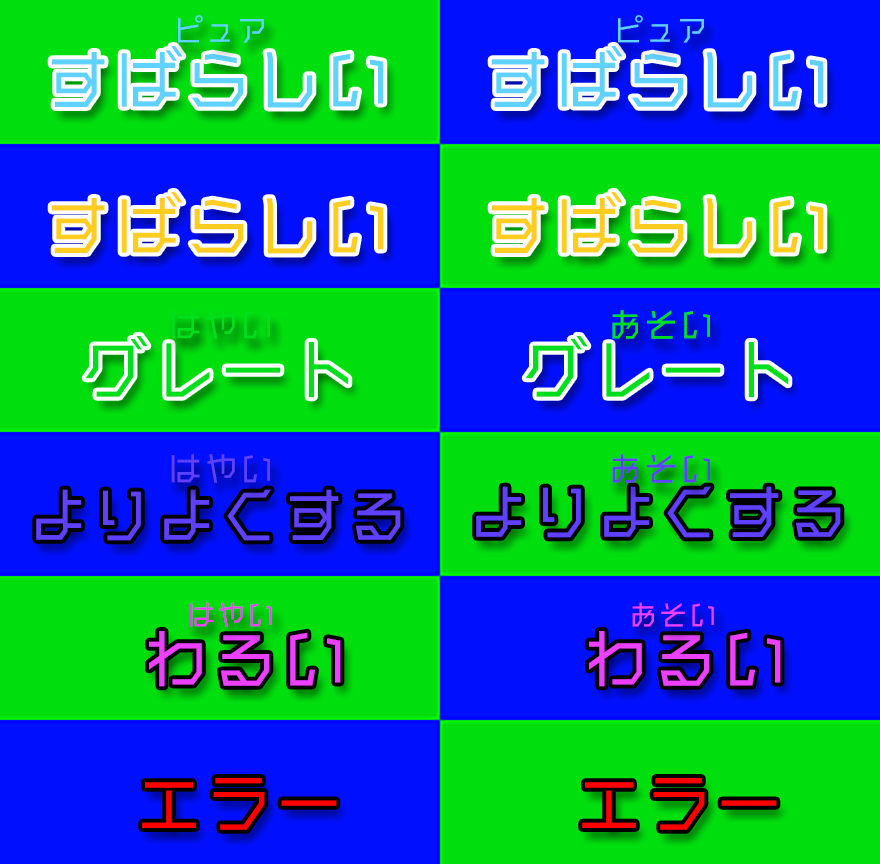
<style>
.page{position:relative;width:880px;height:864px;background:#00df0e}
.page>*{position:absolute;margin:0}
.t1{font:32px "Makinas-4-Square";color:#60d2ff}
.t2{font:70px "Makinas-4-Square";color:#60d2ff}
.t3{font:70px "Makinas-4-Square";color:#ffcc20}
.t4{font:36px "Makinas-4-Square";color:#00df1d}
.t5{font:70px "Makinas-4-Square";color:#00df1d}
.t6{font:36px "Makinas-4-Square";color:#5f40ff}
.t7{font:64px "Makinas-4-Square";color:#5f40ff}
.t8{font:30px "Makinas-4-Square";color:#ec40ff}
.t9{font:70px "Makinas-4-Square";color:#ec40ff}
.t10{font:70px "Makinas-4-Square";color:#ff0000}
</style>
<div class="page">
<p class="t1" style="left:178px;top:15px;width:86px;height:28px">ピュア</p>
<p class="t1" style="left:618px;top:15px;width:86px;height:28px">ピュア</p>
<p class="t2" style="left:51px;top:46px;width:333px;height:62px">すばらしい</p>
<p class="t2" style="left:491px;top:46px;width:333px;height:62px">すばらしい</p>
<p class="t3" style="left:51px;top:192px;width:333px;height:62px">すばらしい</p>
<p class="t3" style="left:491px;top:192px;width:333px;height:62px">すばらしい</p>
<p class="t4" style="left:171px;top:310px;width:99px;height:29px">はやい</p>
<p class="t4" style="left:612px;top:310px;width:98px;height:29px">おそい</p>
<p class="t5" style="left:525px;top:335px;width:264px;height:63px">グレート</p>
<p class="t6" style="left:171px;top:454px;width:99px;height:29px">はやい</p>
<p class="t6" style="left:612px;top:454px;width:98px;height:29px">おそい</p>
<p class="t7" style="left:476px;top:486px;width:365px;height:52px">よりよくする</p>
<p class="t7" style="left:36px;top:489px;width:365px;height:52px">よりよくする</p>
<p class="t8" style="left:190px;top:602px;width:82px;height:25px">はやい</p>
<p class="t8" style="left:632px;top:602px;width:82px;height:25px">おそい</p>
<p class="t9" style="left:148px;top:631px;width:193px;height:56px">わるい</p>
<p class="t9" style="left:588px;top:631px;width:193px;height:56px">わるい</p>
<p class="t10" style="left:142px;top:778px;width:195px;height:52px">エラー</p>
<p class="t10" style="left:582px;top:778px;width:195px;height:52px">エラー</p>
</div>
